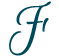
<style>
.page{position:relative;width:59px;height:56px;background:#ffffff}
.page>*{position:absolute;margin:0}
.t1{font:71.3px "EuphoriaScript-Regular";letter-spacing:-0.01em;color:#00495a}
</style>
<div class="page">
<p class="t1" style="left:9px;top:1px;width:42px;height:55px">F</p>
</div>
